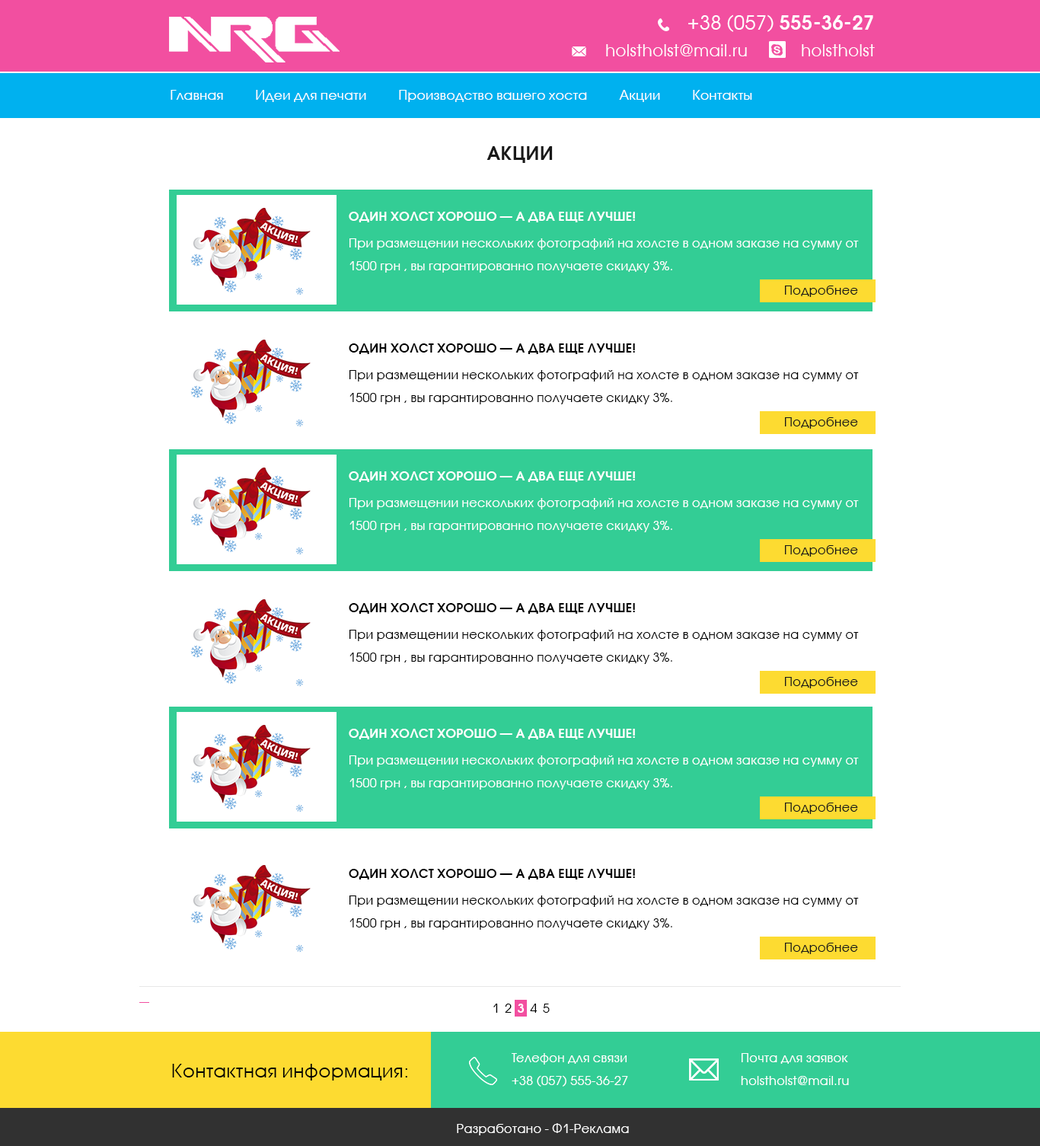
<style>
.page{position:relative;width:1040px;height:1146px;background:#ffffff}
.page>*{position:absolute;margin:0}
.t1{font:19px "AvantGardeCTT";letter-spacing:0.025em;color:#ffffff}
.t2{font:19px "AvantGardeCTT-Bold";letter-spacing:0.025em;color:#ffffff}
.t3{font:16px "AvantGardeCTT";letter-spacing:0.025em;color:#ffffff}
.t4{font:12.9px "AvantGardeCTT";letter-spacing:0.025em;color:#ffffff}
.t5{font:18.3px "AvantGardeCTT-Bold";letter-spacing:0.025em;color:#191919;text-transform:uppercase}
.t6{font:12.2px/22.8px "AvantGardeCTT";letter-spacing:0.025em;color:#ffffff}
.t7{font:12.2px/22.8px "AvantGardeCTT-Bold";letter-spacing:0.025em;color:#ffffff;text-transform:uppercase}
.t8{font:12.2px/3.8px "AvantGardeCTT";letter-spacing:0.025em;color:#ffffff}
.t9{font:12.2px "AvantGardeCTT";letter-spacing:0.025em;color:#191919}
.t10{font:12.2px/22.8px "AvantGardeCTT";letter-spacing:0.025em;color:#000000}
.t11{font:12.2px/22.8px "AvantGardeCTT-Bold";letter-spacing:0.025em;color:#000000;text-transform:uppercase}
.t12{font:12.2px/3.8px "AvantGardeCTT";letter-spacing:0.025em;color:#000000}
.t13{font:12.2px "AvantGardeCTT";letter-spacing:0.125em;color:#000000;text-transform:uppercase}
.t14{font:12.2px "AvantGardeCTT-Bold";letter-spacing:0.125em;color:#ffffff;text-transform:uppercase}
.t15{font:18.3px "AvantGardeCTT";letter-spacing:0.025em;color:#000000}
.t16{font:12.2px "AvantGardeCTT";letter-spacing:0.025em;color:#ffffff}
</style>
<div class="page">
<p class="t1" style="left:688px;top:14px;width:186px;height:18px">+38 (057) <span class="t2">555-36-27</span></p>
<p class="t3" style="left:606px;top:44px;width:141px;height:12px">holstholst@mail.ru</p>
<p class="t3" style="left:802px;top:44px;width:73px;height:12px">holstholst</p>
<p class="t4" style="left:171px;top:90px;width:52px;height:10px">Главная</p>
<p class="t4" style="left:256px;top:90px;width:110px;height:12px">Идеи для печати</p>
<p class="t4" style="left:399px;top:90px;width:188px;height:12px">Производство вашего хоста</p>
<p class="t4" style="left:619px;top:90px;width:41px;height:12px">Акции</p>
<p class="t4" style="left:693px;top:90px;width:59px;height:10px">Контакты</p>
<p class="t5" style="left:487px;top:146px;width:66px;height:17px">Акции</p>
<p class="t6" style="left:349px;top:212px;width:510px;height:61px;text-align:justify"><span class="t7">Один холст хорошо — а два еще лучше!<br><br></span><span class="t8">Пр</span>и размещении нескольких фотографий на холсте в одном заказе на сумму от 1500 грн , вы гарантированно получаете скидку 3%.</p>
<p class="t9" style="left:785px;top:286px;width:73px;height:11px">Подробнее</p>
<p class="t10" style="left:349px;top:343px;width:510px;height:61px;text-align:justify"><span class="t11">Один холст хорошо — а два еще лучше!<br><br></span><span class="t12">Пр</span>и размещении нескольких фотографий на холсте в одном заказе на сумму от 1500 грн , вы гарантированно получаете скидку 3%.</p>
<p class="t9" style="left:785px;top:417px;width:73px;height:12px">Подробнее</p>
<p class="t6" style="left:349px;top:471px;width:510px;height:61px;text-align:justify"><span class="t7">Один холст хорошо — а два еще лучше!<br><br></span><span class="t8">Пр</span>и размещении нескольких фотографий на холсте в одном заказе на сумму от 1500 грн , вы гарантированно получаете скидку 3%.</p>
<p class="t9" style="left:785px;top:545px;width:73px;height:12px">Подробнее</p>
<p class="t10" style="left:349px;top:603px;width:510px;height:61px;text-align:justify"><span class="t11">Один холст хорошо — а два еще лучше!<br><br></span><span class="t12">Пр</span>и размещении нескольких фотографий на холсте в одном заказе на сумму от 1500 грн , вы гарантированно получаете скидку 3%.</p>
<p class="t9" style="left:785px;top:677px;width:73px;height:11px">Подробнее</p>
<p class="t6" style="left:349px;top:729px;width:510px;height:61px;text-align:justify"><span class="t7">Один холст хорошо — а два еще лучше!<br><br></span><span class="t8">Пр</span>и размещении нескольких фотографий на холсте в одном заказе на сумму от 1500 грн , вы гарантированно получаете скидку 3%.</p>
<p class="t9" style="left:785px;top:803px;width:73px;height:11px">Подробнее</p>
<p class="t10" style="left:349px;top:869px;width:510px;height:61px;text-align:justify"><span class="t11">Один холст хорошо — а два еще лучше!<br><br></span><span class="t12">Пр</span>и размещении нескольких фотографий на холсте в одном заказе на сумму от 1500 грн , вы гарантированно получаете скидку 3%.</p>
<p class="t9" style="left:785px;top:943px;width:73px;height:11px">Подробнее</p>
<p class="t13" style="left:494px;top:1004px;width:56px;height:9px">1 2 <span class="t14">3</span> 4 5</p>
<p class="t6" style="left:512px;top:1053px;width:116px;height:34px">Телефон для связи<br>+38 (057) 555-36-27</p>
<p class="t6" style="left:741px;top:1053px;width:108px;height:32px">Почта для заявок<br>holstholst@mail.ru</p>
<p class="t15" style="left:172px;top:1064px;width:235px;height:17px">Контактная информация:</p>
<p class="t16" style="left:457px;top:1123px;width:172px;height:13px">Разработано - Ф1-Реклама</p>
</div>
